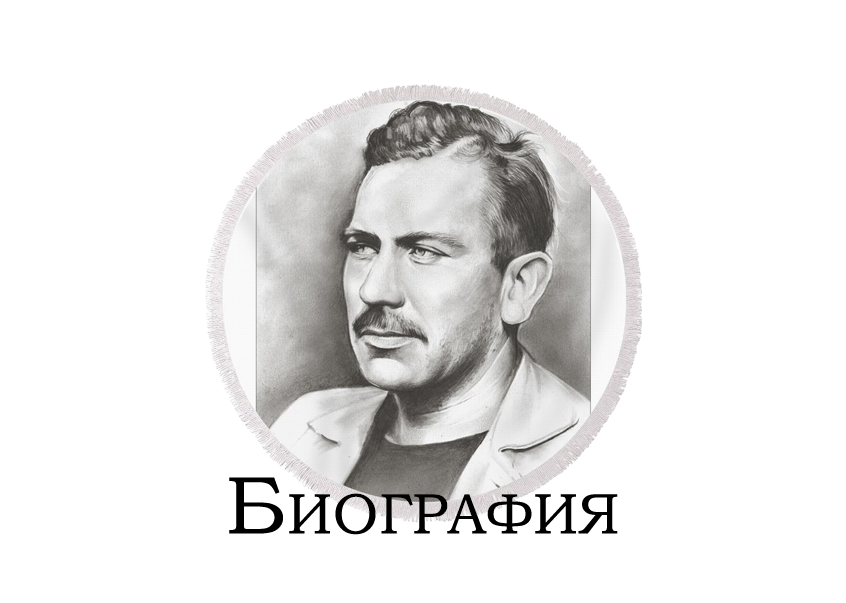
<style>
.page{position:relative;width:846px;height:603px;background:#ffffff}
.page>*{position:absolute;margin:0}
.t1{font:82px "BookmanOldStyle";color:#000000;font-variant:small-caps}
</style>
<div class="page">
<p class="t1" style="left:229px;top:477px;width:389px;height:58px">Биография</p>
</div>
